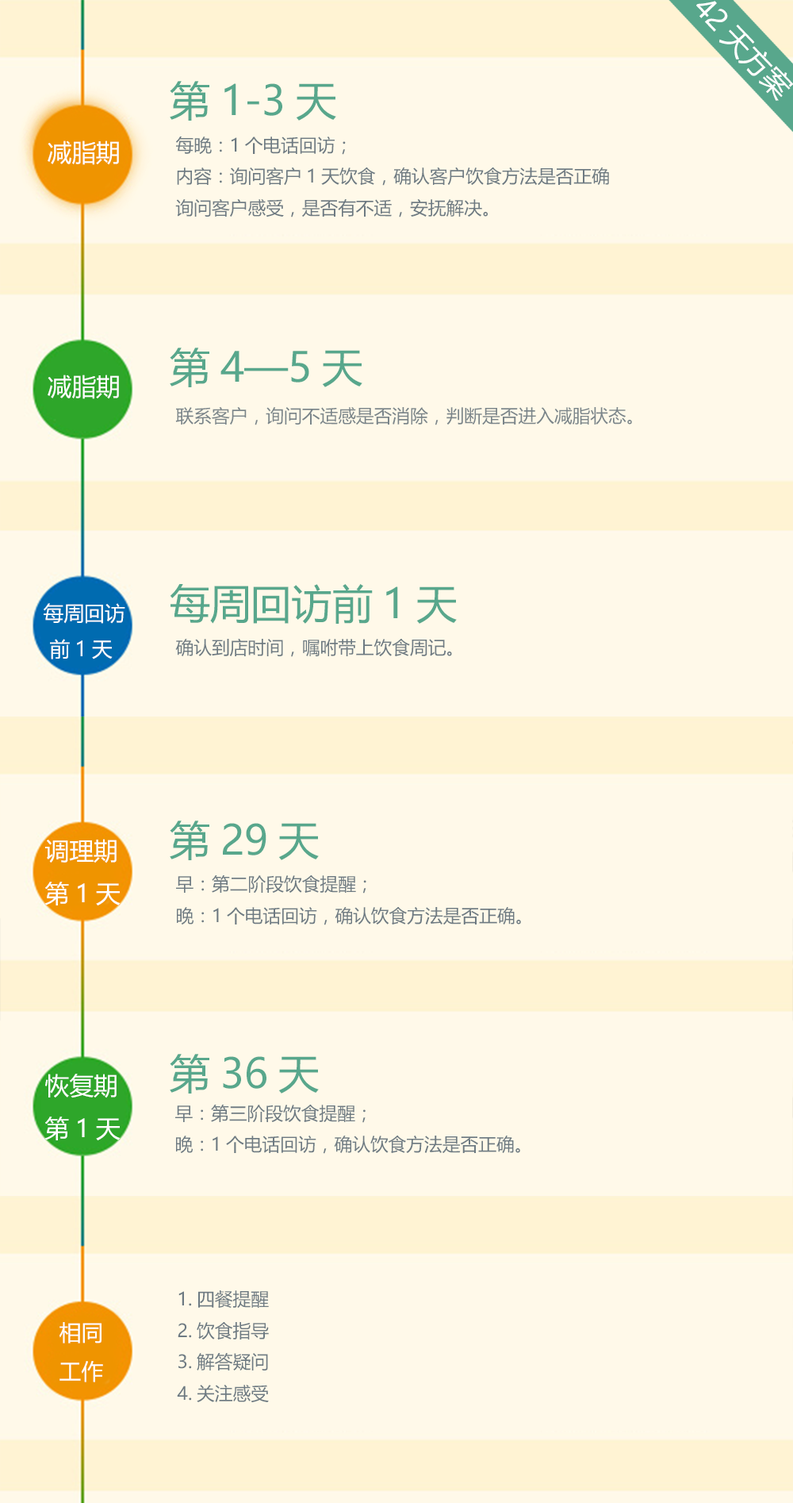
<style>
.page{position:relative;width:793px;height:1503px;background:#fff9e9}
.page>*{position:absolute;margin:0}
.t1{font:28.6px "MicrosoftYaHei";color:#ffffff}
.t2{font:40.6px "MicrosoftYaHei";color:#58a78c}
.t3{font:18px "MicrosoftYaHei";color:#6d7a82}
.t4{font:24.4px "MicrosoftYaHei";color:#ffffff}
.t5{font:18px "MicrosoftYaHei";color:#7a858a}
.t6{font:20.4px "MicrosoftYaHei";color:#ffffff}
.t7{font:22px "MicrosoftYaHei";color:#ffffff}
</style>
<div class="page">
<p class="t1" style="left:697px;top:1px;width:97px;height:100px;rotate:46deg">42天方案</p>
<p class="t2" style="left:170px;top:81px;width:166px;height:40px">第1-3天</p>
<p class="t3" style="left:175px;top:136px;width:434px;height:81px">每晚：1个电话回访；<br>内容：询问客户1天饮食，确认客户饮食方法是否正确<br>询问客户感受，是否有不适，安抚解决。</p>
<p class="t4" style="left:48px;top:140px;width:71px;height:25px">减脂期</p>
<p class="t2" style="left:170px;top:348px;width:193px;height:39px">第4—5天</p>
<p class="t4" style="left:48px;top:375px;width:71px;height:24px">减脂期</p>
<p class="t5" style="left:175px;top:406px;width:457px;height:19px">联系客户，询问不适感是否消除，判断是否进入减脂状态。</p>
<p class="t2" style="left:170px;top:584px;width:287px;height:40px">每周回访前1天</p>
<p class="t6" style="left:44px;top:603px;width:81px;height:56px">每周回访<br> 前1天</p>
<p class="t3" style="left:175px;top:638px;width:277px;height:19px">确认到店时间，嘱咐带上饮食周记。</p>
<p class="t2" style="left:170px;top:820px;width:149px;height:40px">第29天</p>
<p class="t4" style="left:44px;top:839px;width:77px;height:66px">调理期<br>第1天</p>
<p class="t3" style="left:176px;top:875px;width:345px;height:50px">早：第二阶段饮食提醒；<br>晚：1个电话回访，确认饮食方法是否正确。</p>
<p class="t2" style="left:170px;top:1054px;width:149px;height:39px">第36天</p>
<p class="t4" style="left:44px;top:1074px;width:77px;height:66px">恢复期<br>第1天</p>
<p class="t3" style="left:175px;top:1105px;width:346px;height:49px">早：第三阶段饮食提醒；<br>晚：1个电话回访，确认饮食方法是否正确。</p>
<p class="t3" style="left:177px;top:1290px;width:92px;height:112px">1.四餐提醒<br>2.饮食指导<br>3.解答疑问<br>4.关注感受</p>
<p class="t7" style="left:60px;top:1322px;width:43px;height:60px">相同<br>工作</p>
</div>
